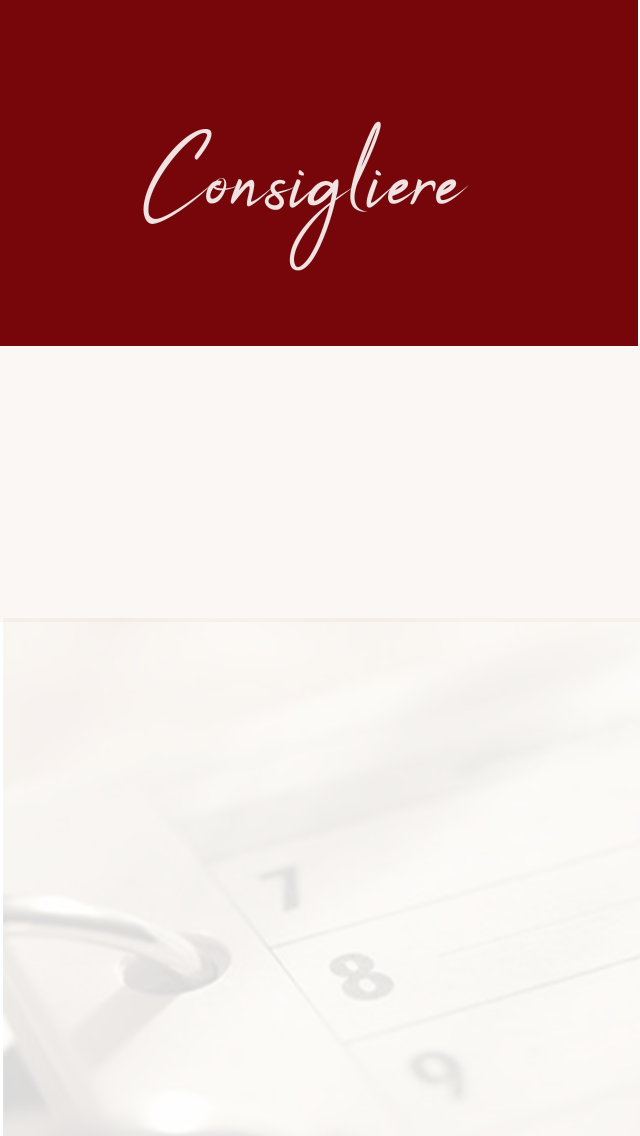
<style>
.page{position:relative;width:640px;height:1136px;background:#760609}
.page>*{position:absolute;margin:0}
.t1{font:120px "Apalu";color:#fbf3f3}
</style>
<div class="page">
<p class="t1" style="left:143px;top:121px;width:326px;height:150px">Consigliere</p>
</div>
